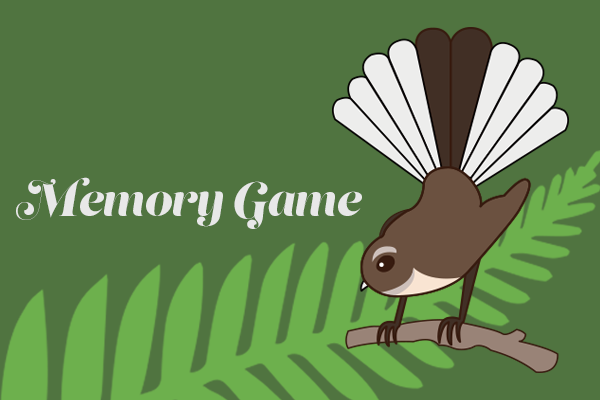
<style>
.page{position:relative;width:600px;height:400px;background:#507440}
.page>*{position:absolute;margin:0}
.t1{font:45.4px "LustScriptDisplay";color:#e8e8e8}
</style>
<div class="page">
<p class="t1" style="left:16px;top:177px;width:346px;height:52px">Memory Game</p>
</div>
